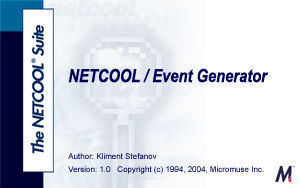
<style>
.page{position:relative;width:300px;height:188px;background:#ffffff}
.page>*{position:absolute;margin:0}
.t1{font:18px "ArialNarrow-BoldItalic";color:#010359}
.t2{font:8px "ArialMT";color:#010359}
.t3{font:8px "ArialMT"}
</style>
<div class="page">
<p class="t1" style="left:68px;top:68px;width:201px;height:15px">NETCOOL / Event Generator</p>
<p class="t2" style="left:68px;top:153px;width:89px;height:6px">Author: Kliment Stefanov</p>
<p class="t2" style="left:68px;top:166px;width:43px;height:6px">Version: 1.0</p>
<p class="t3" style="left:117px;top:166px;width:147px;height:8px">Copyright (c) 1994, 2004, Micromuse Inc.</p>
</div>
